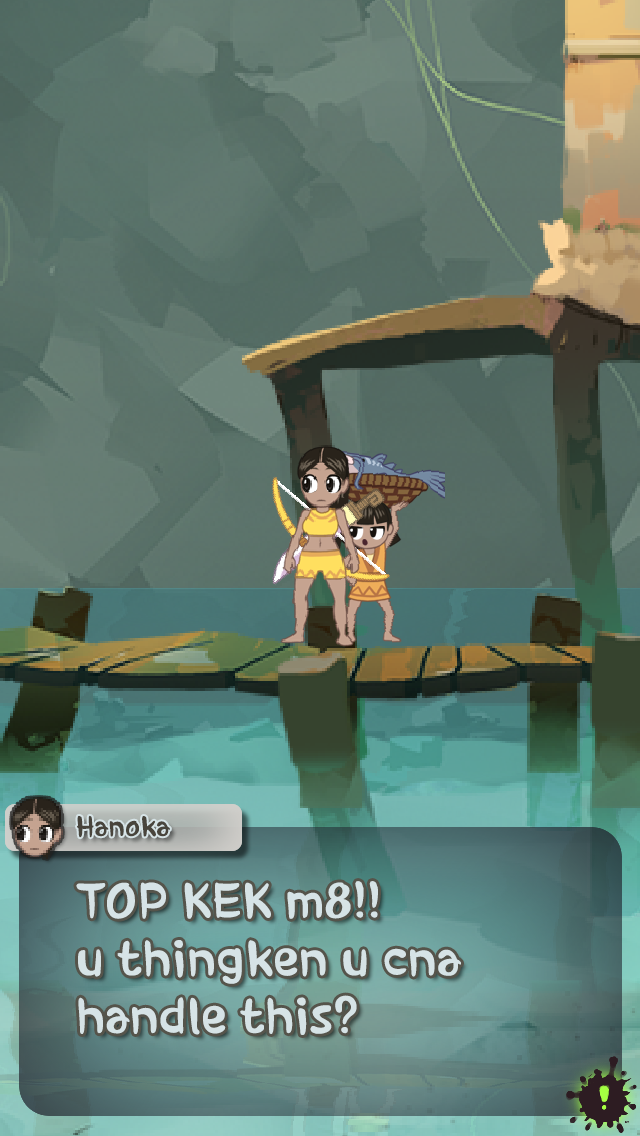
<style>
.page{position:relative;width:640px;height:1136px}
.page>*{position:absolute;margin:0}
.t1{font:27.3px "HoonWhayangyunwhaR";color:#48443c}
.t2{font:48px "HoonWhayangyunwhaR";color:#d6e3e6}
</style>
<div class="page">
<p class="t1" style="left:77px;top:815px;width:93px;height:23px">Hanoka</p>
<p class="t2" style="left:76px;top:881px;width:385px;height:154px">TOP KEK m8!!<br>u thingken u cna handle this?</p>
</div>
